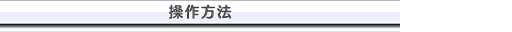
<style>
.page{position:relative;width:512px;height:32px;background:#ffffff}
.page>*{position:absolute;margin:0}
.t1{font:14.7px "FZFW-QingYinTiS-B--GB1-0";letter-spacing:0.1em;color:#3d3e3d}
</style>
<div class="page">
<p class="t1" style="left:169px;top:4px;width:63px;height:15px">操作方法</p>
</div>
